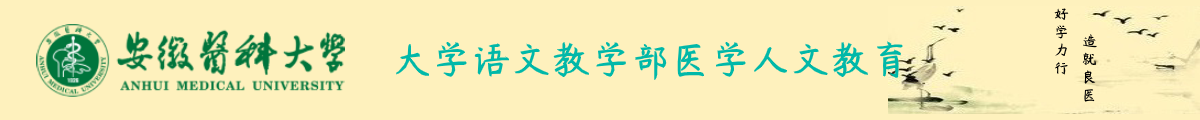
<style>
.page{position:relative;width:1200px;height:120px;background:#fef1bd}
.page>*{position:absolute;margin:0}
.t1{font:15px "YRDZST-Semibold";color:#000000}
.t2{font:40px "YRDZST-Semibold";color:#00b8a9}
</style>
<div class="page">
<p class="t1" style="left:1054px;top:8px;width:15px;height:67px">好<br>学<br>力<br>行</p>
<p class="t2" style="left:396px;top:41px;width:507px;height:39px">大学语文教学部医学人文教育</p>
<p class="t1" style="left:1082px;top:34px;width:15px;height:68px">造<br>就<br>良<br>医</p>
</div>
